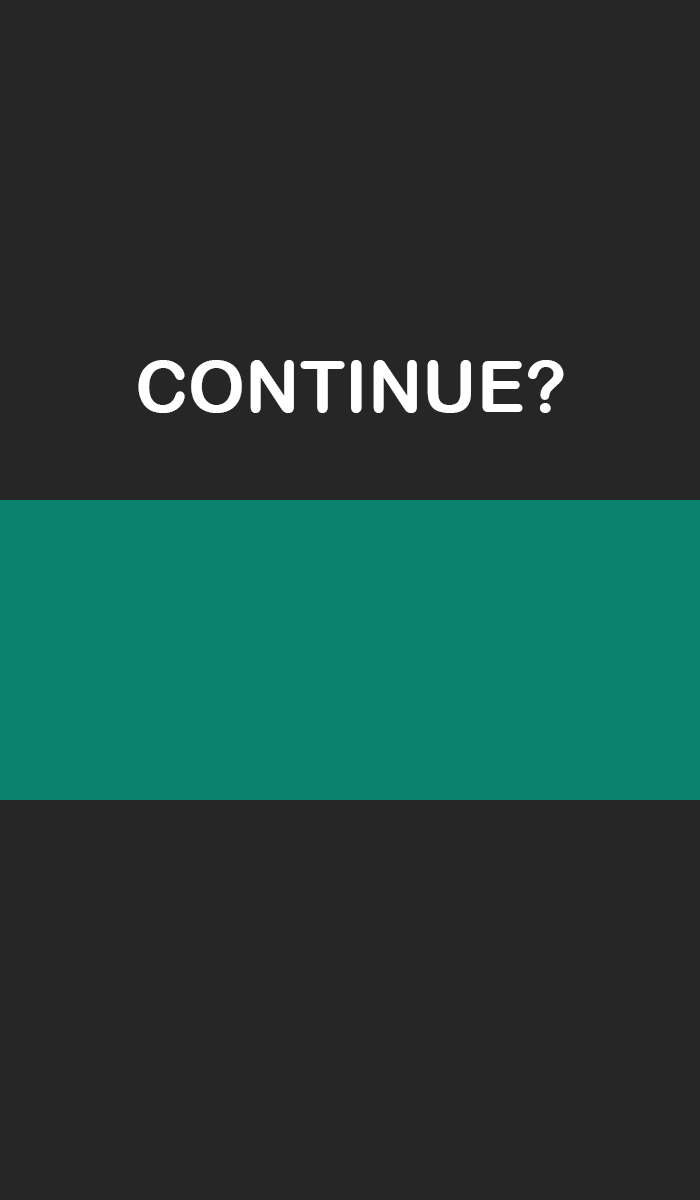
<style>
.page{position:relative;width:700px;height:1200px;background:#262626}
.page>*{position:absolute;margin:0}
.t1{font:72px "ArialRoundedMTBold";color:#ffffff}
</style>
<div class="page">
<p class="t1" style="left:138px;top:360px;width:426px;height:53px">CONTINUE?</p>
</div>
